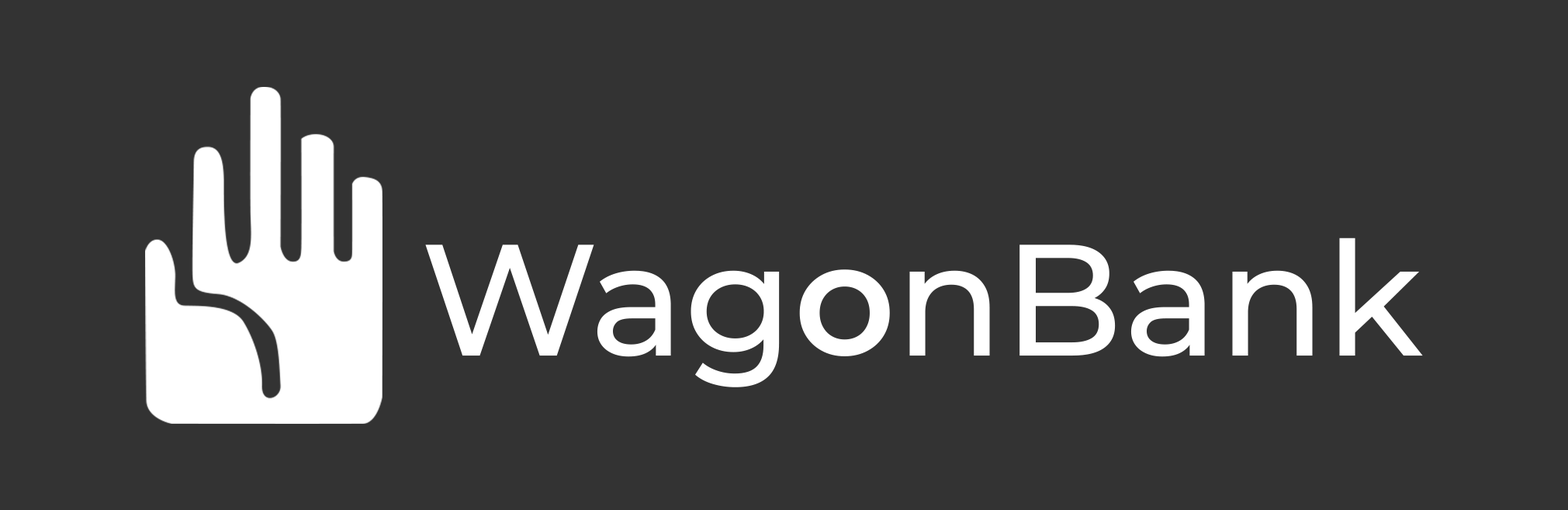
<style>
.page{position:relative;width:1568px;height:510px;background:#333333}
.page>*{position:absolute;margin:0}
.t1{font:158.1px "MontserratRoman-SemiBold";color:#ffffff}
</style>
<div class="page">
<p class="t1" style="left:425px;top:237px;width:998px;height:150px">WagonBank</p>
</div>
